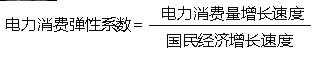
<style>
.page{position:relative;width:319px;height:57px;background:#ffffff}
.page>*{position:absolute;margin:0}
.t1{font:16px "MicrosoftYaHei";letter-spacing:-0.005em;color:#0d0d0d}
</style>
<div class="page">
<p class="t1" style="left:162px;top:6px;width:142px;height:15px">电力消费量增长速度</p>
<p class="t1" style="left:6px;top:17px;width:136px;height:15px">电力消费弹性系数=</p>
<p class="t1" style="left:167px;top:33px;width:126px;height:15px">国民经济增长速度</p>
</div>
